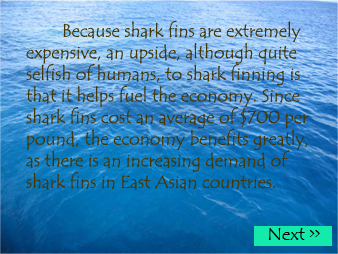
<style>
.page{position:relative;width:338px;height:254px}
.page>*{position:absolute;margin:0}
.t1{font:18px "TempusSansITC";color:#463607}
</style>
<div class="page">
<p class="t1" style="left:25px;top:20px;width:284px;height:170px">Because shark fins are extremely expensive, an upside, although quite selfish of humans, to shark finning is that it helps fuel the economy. Since shark fins cost an average of $700 per pound, the economy benefits greatly, as there is an increasing demand of shark fins in East Asian countries.</p>
</div>
